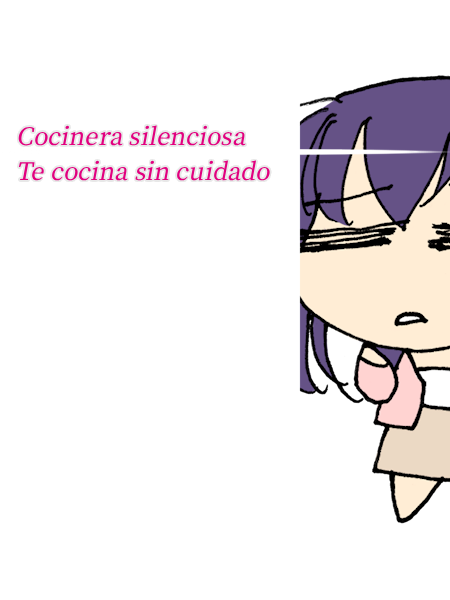
<style>
.page{position:relative;width:450px;height:600px;background:#ffffff}
.page>*{position:absolute;margin:0}
.t1{font:29px "OfficialFateFont-Medium";color:#e2007f;font-style:italic}
</style>
<div class="page">
<p class="t1" style="left:18px;top:125px;width:228px;height:21px">Cocinera silenciosa</p>
<p class="t1" style="left:18px;top:160px;width:252px;height:21px">Te cocina sin cuidado</p>
</div>
